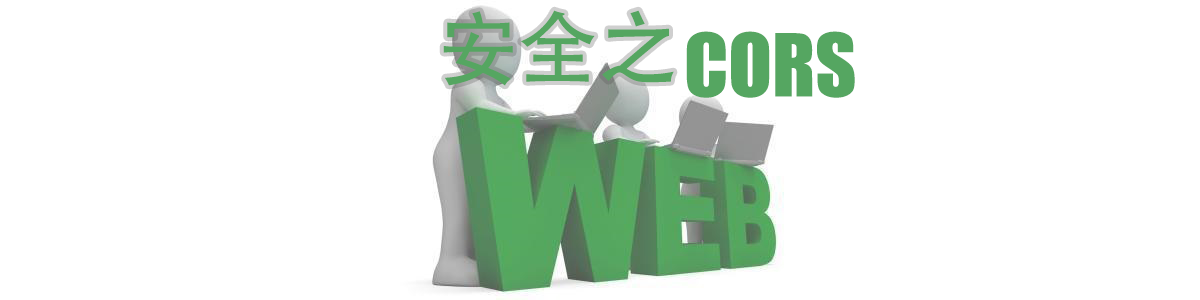
<style>
.page{position:relative;width:1200px;height:300px;background:#ffffff}
.page>*{position:absolute;margin:0}
.t1{font:80px "AdobeHeitiStd-Regular";color:#55a661}
.t2{font:80px "Impact";color:#55a661}
</style>
<div class="page">
<p class="t1" style="left:443px;top:10px;width:231px;height:76px">安全之</p>
<p class="t2" style="left:686px;top:31px;width:169px;height:67px">CORS</p>
</div>
